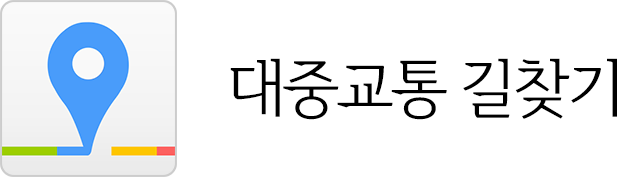
<style>
.page{position:relative;width:624px;height:177px;background:#ffffff}
.page>*{position:absolute;margin:0}
.t1{font:63px "Daehan";letter-spacing:-0.05em;color:#000000}
</style>
<div class="page">
<p class="t1" style="left:230px;top:58px;width:387px;height:62px">대중교통 길찾기</p>
</div>
